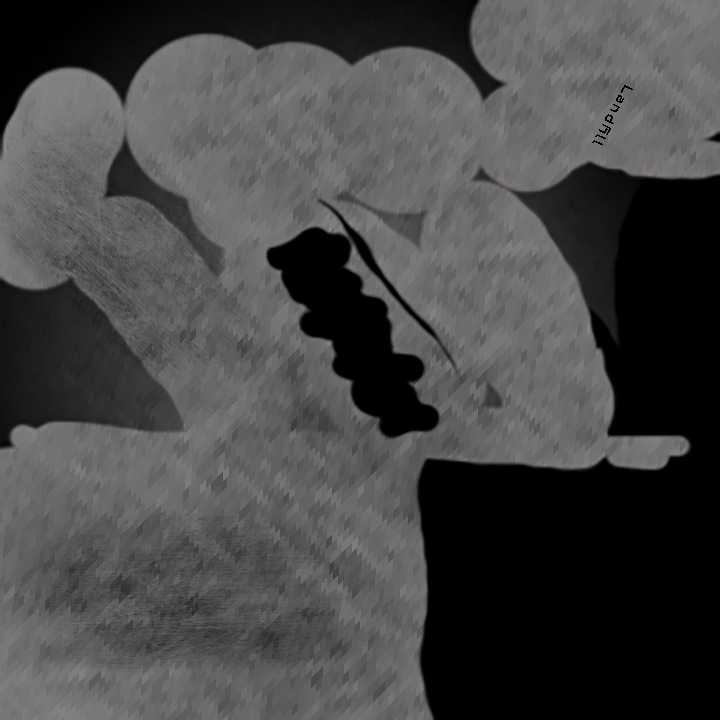
<style>
.page{position:relative;width:720px;height:720px;background:#000000}
.page>*{position:absolute;margin:0}
.t1{font:12.9px "Audiowide-Regular";letter-spacing:0.205em;color:#000000;scale:0.96 1}
</style>
<div class="page">
<p class="t1" style="left:592px;top:85px;width:41px;height:60px;rotate:120deg">Landfill</p>
</div>
